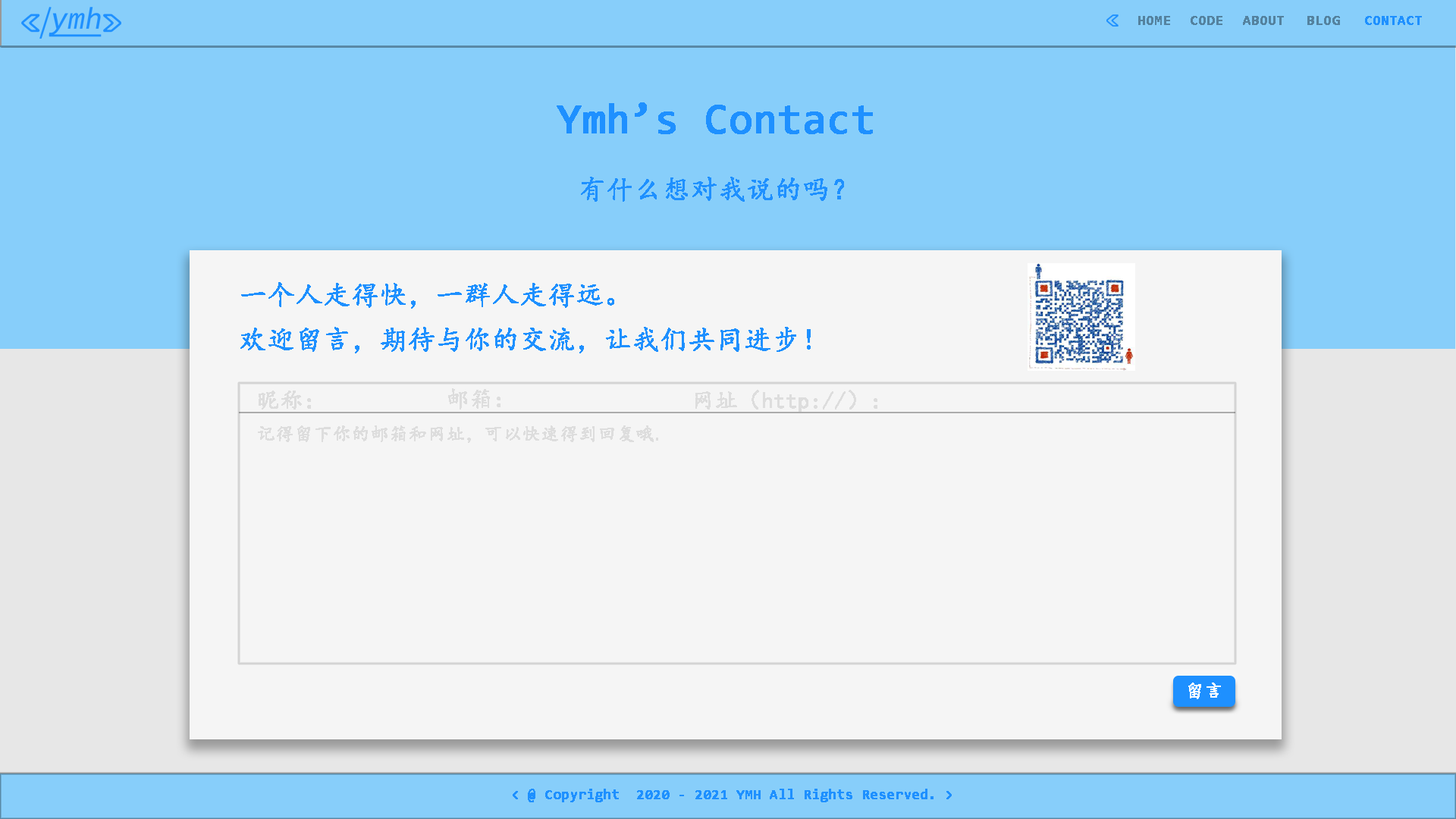
<style>
.page{position:relative;width:1456px;height:819px;background:#f5f5f5}
.page>*{position:absolute;margin:0}
.t1{font:13.6px "Consolas";color:#54829f;font-weight:bold}
.t2{font:13.6px "Consolas";color:#1e90ff;font-weight:bold}
.t3{font:42.5px "Consolas";color:#1e90ff;font-weight:bold}
.t4{font:27.3px "KaiTi";color:#1e90ff;font-weight:bold}
.t5{font:22.7px "KaiTi";color:#dddddd;font-weight:bold}
.t6{font:18.2px "KaiTi";color:#dddddd;font-weight:bold}
.t7{font:18.2px "KaiTi";color:#ffffff;font-weight:bold}
</style>
<div class="page">
<p class="t1" style="left:1138px;top:16px;width:32px;height:9px">HOME</p>
<p class="t1" style="left:1191px;top:16px;width:31px;height:9px">CODE</p>
<p class="t1" style="left:1243px;top:16px;width:41px;height:9px">ABOUT</p>
<p class="t1" style="left:1307px;top:16px;width:33px;height:9px">BLOG</p>
<p class="t2" style="left:1365px;top:16px;width:57px;height:9px">CONTACT</p>
<p class="t3" style="left:557px;top:102px;width:316px;height:32px">Ymh’s Contact</p>
<p class="t4" style="left:581px;top:177px;width:263px;height:25px">有什么想对我说的吗？</p>
<p class="t4" style="left:241px;top:282px;width:373px;height:27px">一个人走得快，一群人走得远。</p>
<p class="t4" style="left:240px;top:327px;width:571px;height:26px">欢迎留言，期待与你的交流，让我们共同进步！</p>
<p class="t5" style="left:448px;top:388px;width:52px;height:21px">邮箱：</p>
<p class="t5" style="left:695px;top:390px;width:182px;height:22px">网址（http://）：</p>
<p class="t5" style="left:259px;top:391px;width:52px;height:18px">昵称：</p>
<p class="t6" style="left:258px;top:425px;width:400px;height:18px">记得留下你的邮箱和网址，可以快速得到回复哦.</p>
<p class="t7" style="left:1188px;top:682px;width:33px;height:17px">留言</p>
<p class="t2" style="left:513px;top:789px;width:439px;height:13px">&lt; @ Copyright  2020 - 2021 YMH All Rights Reserved. &gt;</p>
</div>
